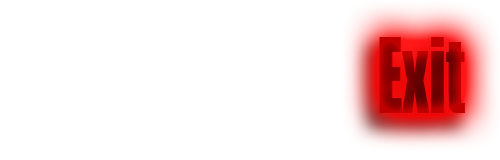
<style>
.page{position:relative;width:500px;height:160px;background:#ffffff}
.page>*{position:absolute;margin:0}
.t1{font:96px "Impact";scale:0.65 1}
</style>
<div class="page">
<p class="t1" style="left:379px;top:37px;width:86px;height:76px">Exit</p>
</div>
